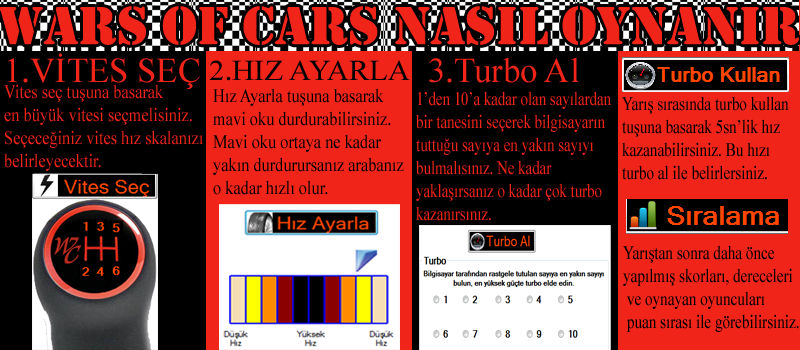
<style>
.page{position:relative;width:800px;height:350px;background:#000000}
.page>*{position:absolute;margin:0}
.t1{font:55.6px "Stencil";color:#f02419}
.t2{font:34.7px "TimesNewRomanPSMT";color:#f02419}
.t3{font:29.1px "TimesNewRomanPSMT";color:#000000;scale:1.05 1}
.t4{font:19.1px "TimesNewRomanPSMT";color:#f02419;scale:0.86 1}
.t5{font:19.1px "TimesNewRomanPSMT";color:#000000;scale:0.86 1}
.t6{font:19.1px "TimesNewRomanPSMT";color:#f02419;scale:0.78 1}
.t7{font:19.1px "TimesNewRomanPSMT";color:#000000;scale:0.79 1}
</style>
<div class="page">
<p class="t1" style="left:0px;top:6px;width:800px;height:39px">WARS OF CARS NASIL OYNANIR</p>
<p class="t2" style="left:8px;top:53px;width:192px;height:36px">1.VİTES SEÇ</p>
<p class="t3" style="left:209px;top:60px;width:201px;height:21px">2.HIZ AYARLA</p>
<p class="t2" style="left:429px;top:57px;width:150px;height:26px">3.Turbo Al</p>
<p class="t4" style="left:4px;top:84px;width:199px;height:87px">Vites seç tuşuna basarak<br>en büyük vitesi seçmelisiniz. <br>Seçeceğiniz vites hız skalanızı<br>belirleyecektir.</p>
<p class="t5" style="left:213px;top:88px;width:191px;height:107px">Hız Ayarla tuşuna basarak<br>mavi oku durdurabilirsiniz.<br>Mavi oku ortaya ne kadar<br>yakın durdurursanız arabanız<br>o kadar hızlı olur.</p>
<p class="t6" style="left:416px;top:91px;width:195px;height:130px">1’den 10’a kadar olan sayılardan<br>bir tanesini seçerek bilgisayarın<br>tuttuğu sayıya en yakın sayıyı<br>bulmalısınız. Ne kadar<br>yaklaşırsanız o kadar çok turbo<br>kazanırsınız.</p>
<p class="t7" style="left:622px;top:96px;width:167px;height:84px">Yarış sırasında turbo kullan<br>tuşuna basarak 5sn’lik hız <br>kazanabilirsiniz. Bu hızı<br>turbo al ile belirlersiniz.</p>
<p class="t7" style="left:623px;top:245px;width:176px;height:87px">Yarıştan sonra daha önce<br>yapılmış skorları, dereceleri<br> ve oynayan oyuncuları<br> puan sırası ile görebilirsiniz.</p>
</div>
